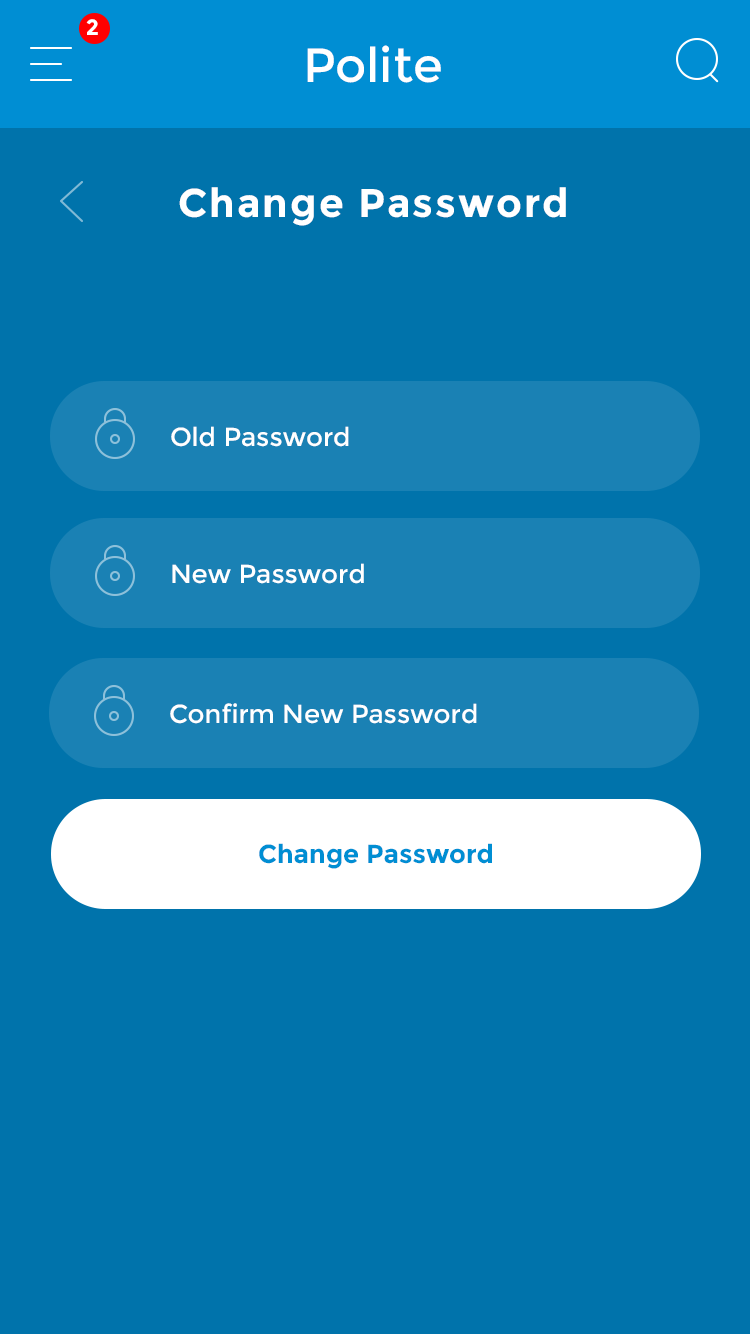
<style>
.page{position:relative;width:750px;height:1334px;background:#0073ab}
.page>*{position:absolute;margin:0}
.t1{font:22px "Montserrat-Bold";letter-spacing:0.05em;color:#ffffff}
.t2{font:48px "Montserrat-Regular";color:#ffffff}
.t3{font:40px "Montserrat-Bold";letter-spacing:0.05em;color:#ffffff}
.t4{font:26px "Montserrat-Regular";color:#ffffff}
.t5{font:26px "Montserrat-Bold";color:#008ed3}
</style>
<div class="page">
<p class="t1" style="left:86px;top:19px;width:12px;height:16px">2</p>
<p class="t2" style="left:307px;top:45px;width:134px;height:38px">Polite</p>
<p class="t3" style="left:179px;top:187px;width:387px;height:39px">Change Password</p>
<p class="t4" style="left:171px;top:426px;width:178px;height:21px">Old Password</p>
<p class="t4" style="left:172px;top:563px;width:192px;height:21px">New Password</p>
<p class="t4" style="left:170px;top:703px;width:307px;height:21px">Confirm New Password</p>
<p class="t5" style="left:259px;top:843px;width:233px;height:26px">Change Password</p>
</div>
